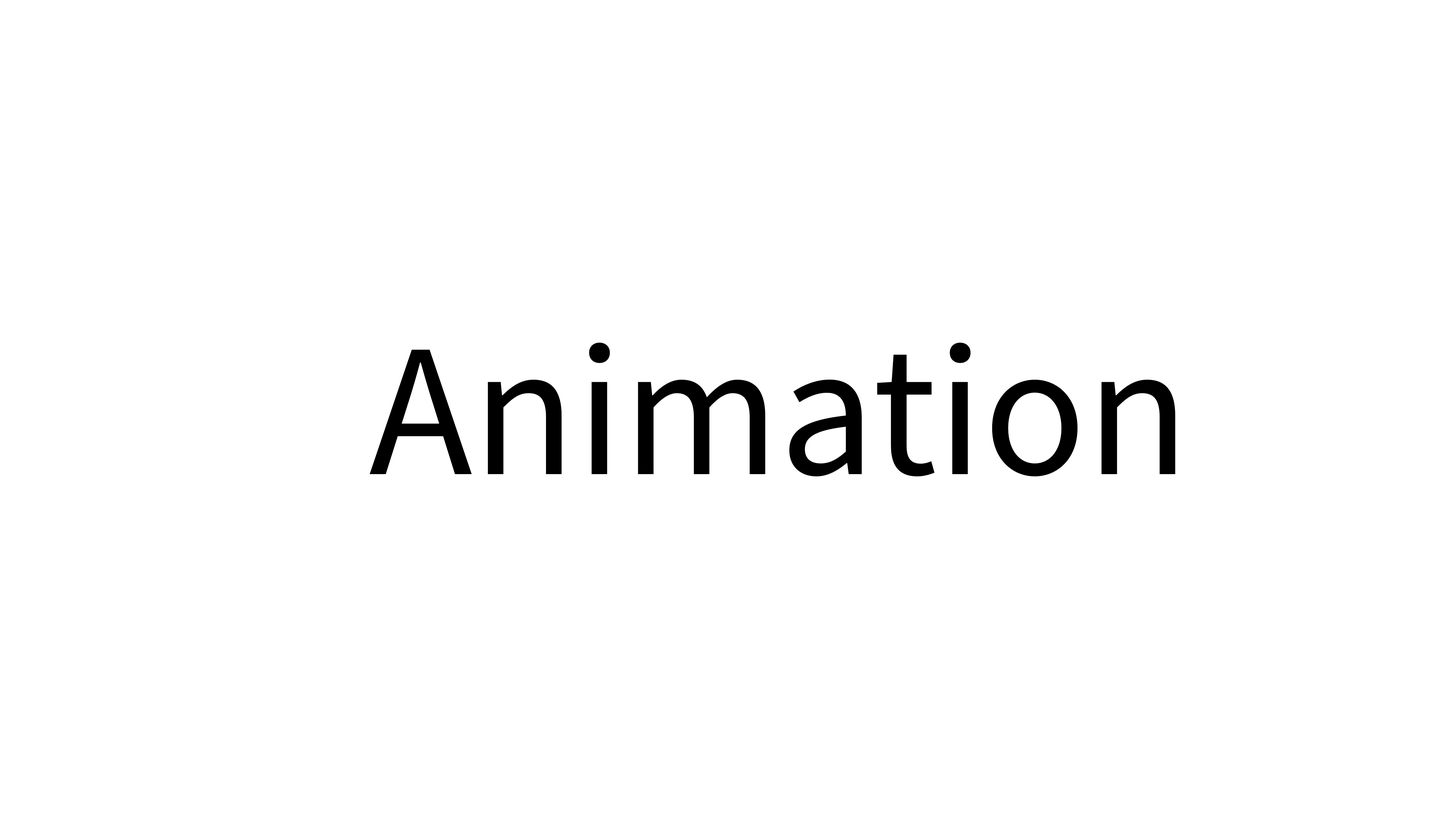
<style>
.page{position:relative;width:1456px;height:819px;background:#ffffff}
.page>*{position:absolute;margin:0}
.t1{font:189.6px "SourceSansRoman-Regular";color:#000000}
</style>
<div class="page">
<p class="t1" style="left:369px;top:342px;width:806px;height:135px">Animation</p>
</div>
